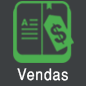
<style>
.page{position:relative;width:86px;height:86px;background:#3c3f41}
.page>*{position:absolute;margin:0}
.t1{font:15.6px "Helvetica-Normal";letter-spacing:0.06em;color:#ffffff;scale:0.89 1}
</style>
<div class="page">
<p class="t1" style="left:17px;top:68px;width:51px;height:13px">Vendas</p>
</div>
